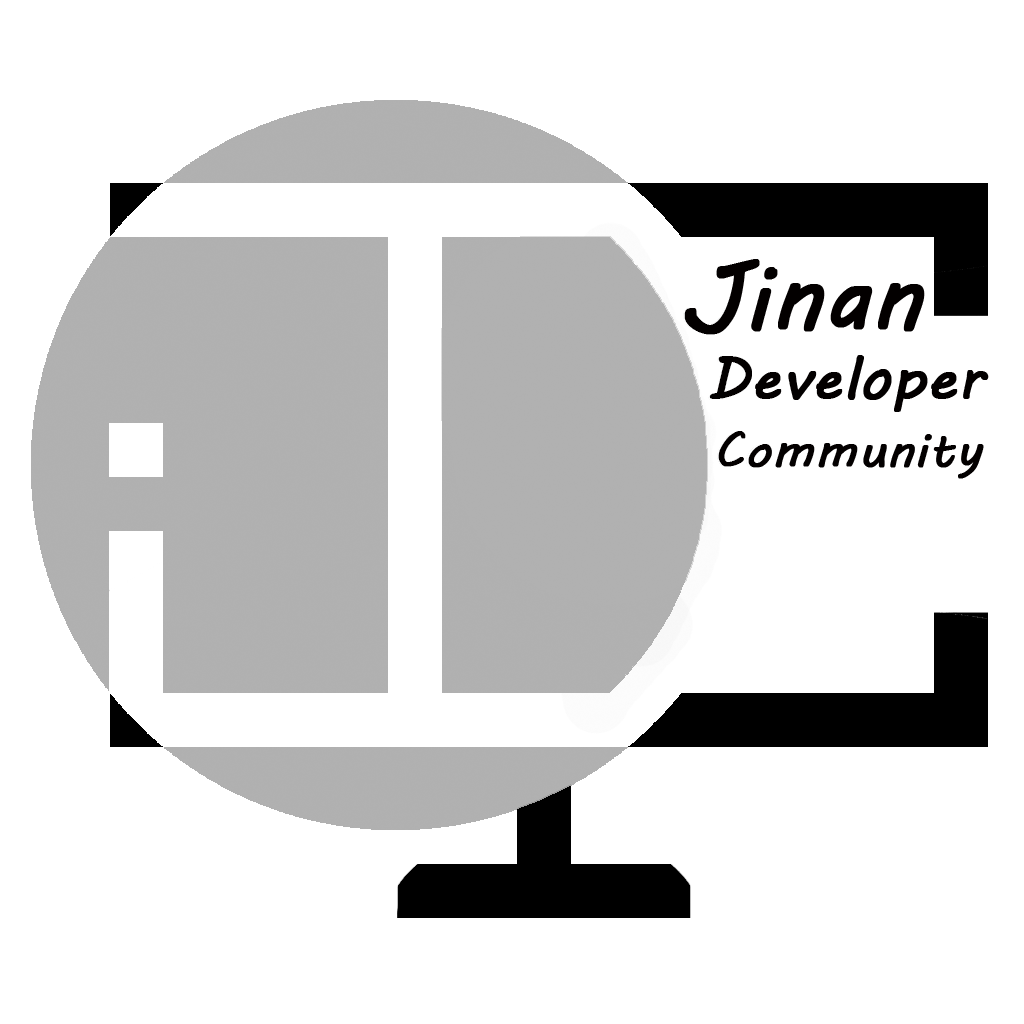
<style>
.page{position:relative;width:1024px;height:1024px;background:#ffffff}
.page>*{position:absolute;margin:0}
.t1{font:59px/77px "MVBoli";color:#030000;font-weight:bold}
.t2{font:92px/99px "MVBoli";color:#030000;font-weight:bold}
.t3{font:49px/77px "MVBoli";color:#030000;font-weight:bold}
</style>
<div class="page">
<p class="t1" style="left:684px;top:259px;width:305px;height:220px"><span class="t2">Jinan<br> </span>Developer<br>  <span class="t3">Community</span></p>
</div>
